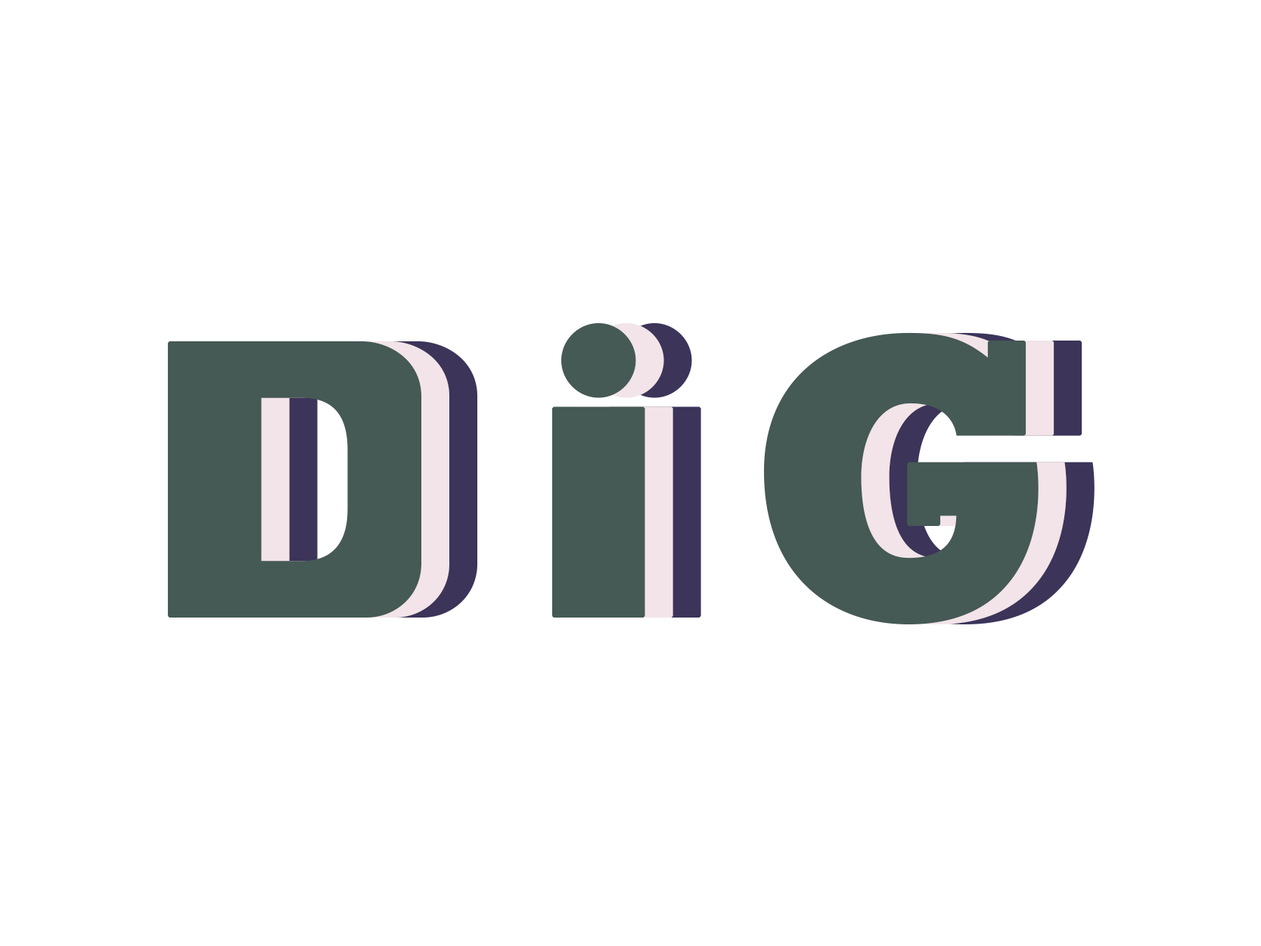
<style>
.page{position:relative;width:1261px;height:946px;background:#ffffff}
.page>*{position:absolute;margin:0}
.t1{font:379.8px "BadTyp-Regular";letter-spacing:0.2em;color:#455955;font-weight:bold}
.t2{font:379.8px "BadTyp-Regular";letter-spacing:0.2em;font-weight:bold}
</style>
<div class="page">
<p class="t1" style="left:167px;top:323px;width:872px;height:301px">Dig</p>
<p class="t1" style="left:195px;top:323px;width:872px;height:301px">Dig</p>
<p class="t2" style="left:223px;top:323px;width:872px;height:301px">Dig</p>
</div>
